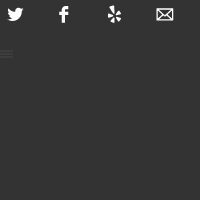
<style>
.page{position:relative;width:200px;height:200px;background:#333333}
.page>*{position:absolute;margin:0}
.t1{font:27.4px "Socialico";color:#ffffff}
.t2{font:27.4px "SocialicoPlus";color:#ffffff}
</style>
<div class="page">
<p class="t1" style="left:59px;top:6px;width:10px;height:17px">F</p>
<p class="t2" style="left:108px;top:5px;width:13px;height:18px">B</p>
<p class="t1" style="left:7px;top:7px;width:17px;height:14px">L</p>
<p class="t2" style="left:156px;top:8px;width:18px;height:13px">M</p>
</div>
